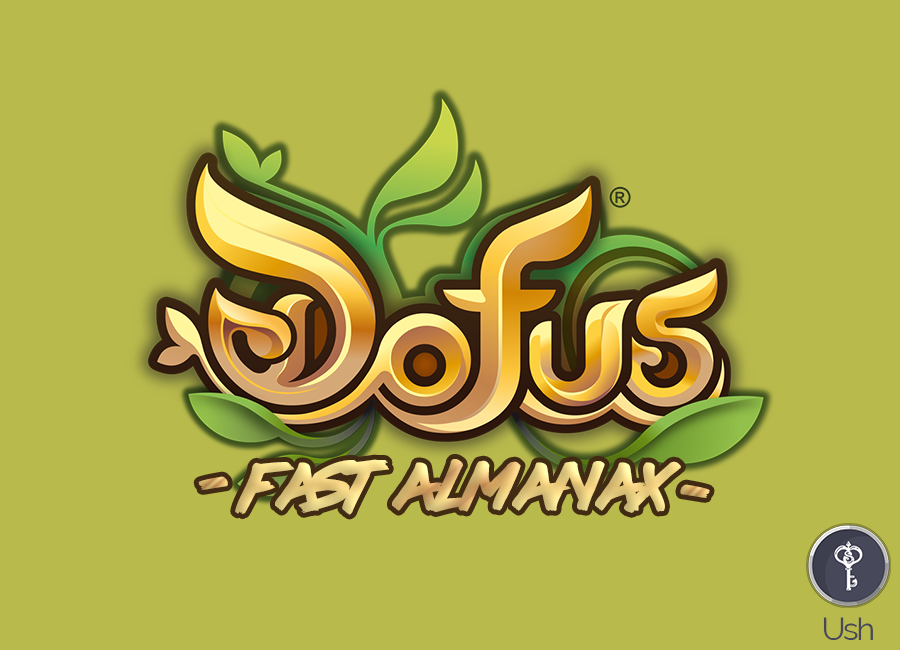
<style>
.page{position:relative;width:900px;height:650px;background:#b9ba4c}
.page>*{position:absolute;margin:0}
.t1{font:60px "lazer84";letter-spacing:-0.06em}
.t2{font:106.2px "lazer84";letter-spacing:-0.06em}
.t3{font:106.3px "lazer84";letter-spacing:-0.06em}
.t4{font:31.5px "Raleway";letter-spacing:-0.06em;color:#474859}
</style>
<div class="page">
<p class="t1" style="left:235px;top:459px;width:446px;height:56px">Fast Almanax</p>
<p class="t2" style="left:198px;top:476px;width:30px;height:14px;rotate:52deg">,</p>
<p class="t3" style="left:680px;top:484px;width:30px;height:14px;rotate:128deg">,</p>
<p class="t4" style="left:823px;top:617px;width:50px;height:23px">Ush</p>
</div>
